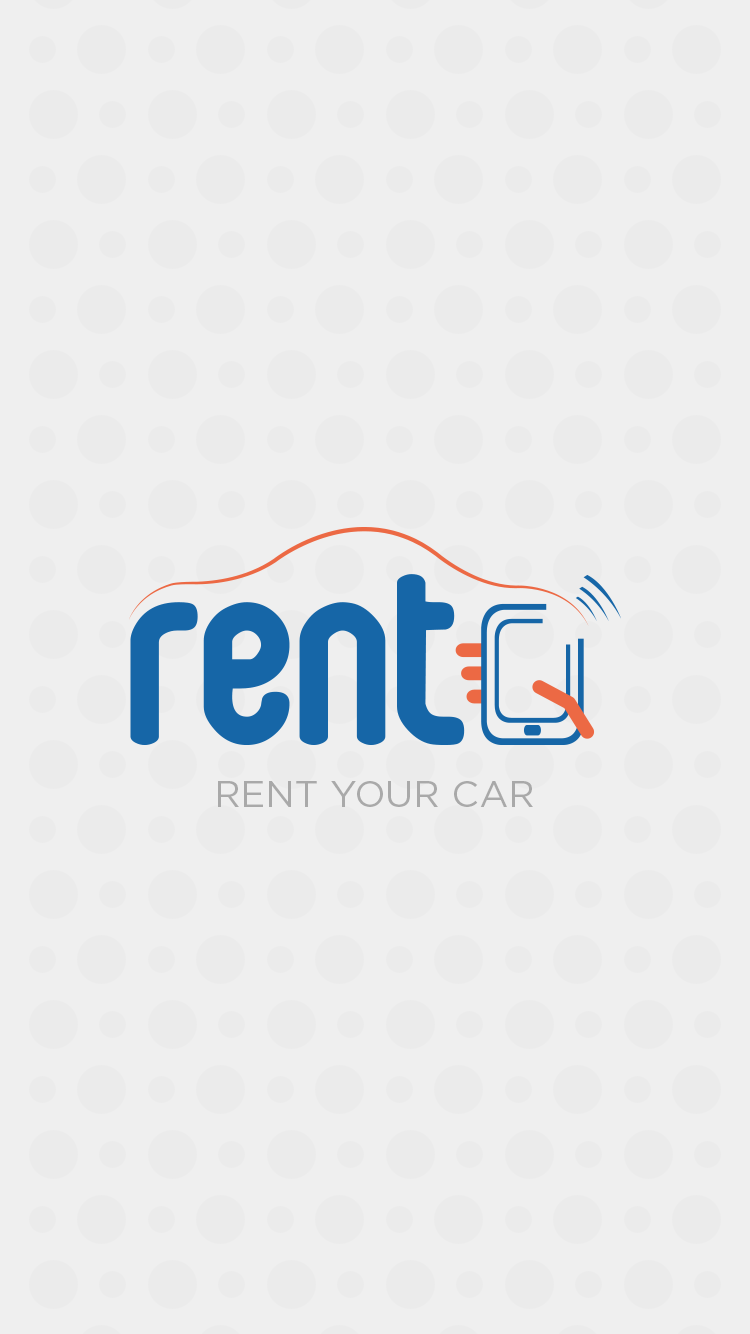
<style>
.page{position:relative;width:750px;height:1334px;background:#efefef}
.page>*{position:absolute;margin:0}
.t1{font:37px "Gotham-Book";color:#a9a9a9;text-transform:uppercase}
</style>
<div class="page">
<p class="t1" style="left:218px;top:781px;width:315px;height:26px">rent your car</p>
</div>
